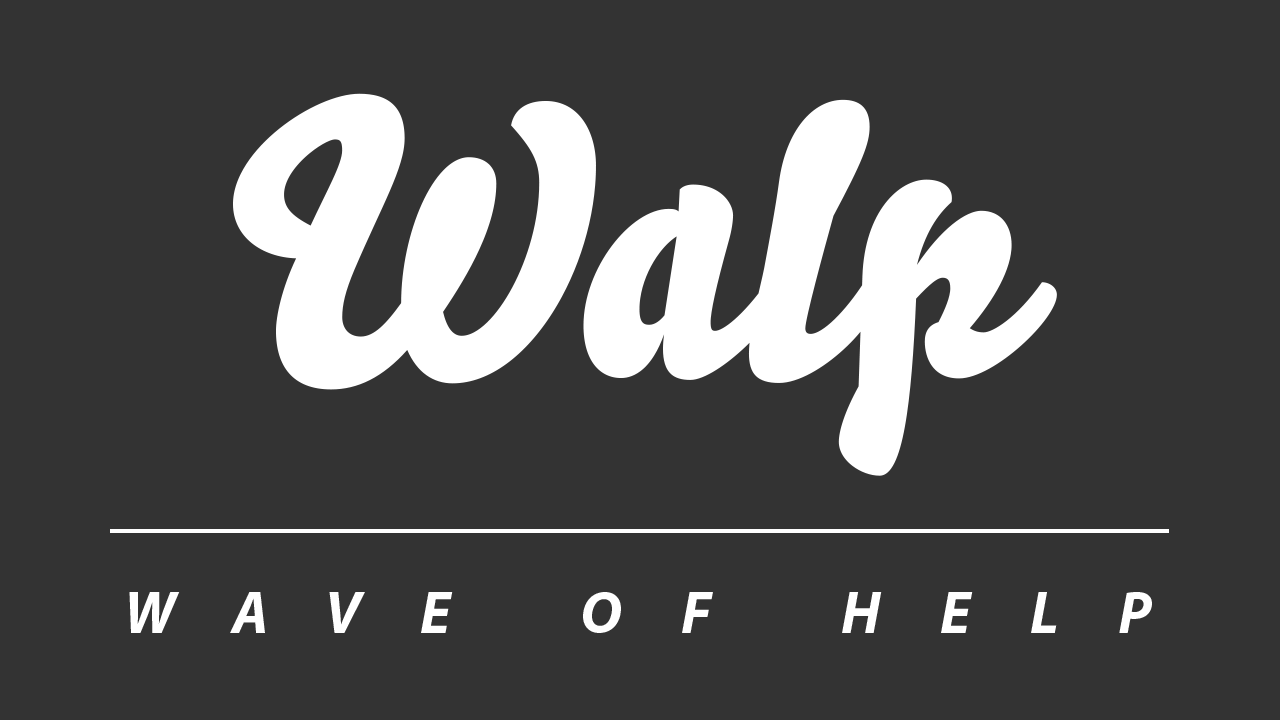
<style>
.page{position:relative;width:1280px;height:720px;background:#333333}
.page>*{position:absolute;margin:0}
.t1{font:380px "Bello-Pro";color:#ffffff}
.t2{font:59.8px "MyriadPro-BoldIt";letter-spacing:1em;color:#ffffff}
</style>
<div class="page">
<p class="t1" style="left:233px;top:93px;width:824px;height:383px">Walp</p>
<p class="t2" style="left:129px;top:592px;width:1023px;height:41px">WAVE OF HELP</p>
</div>
